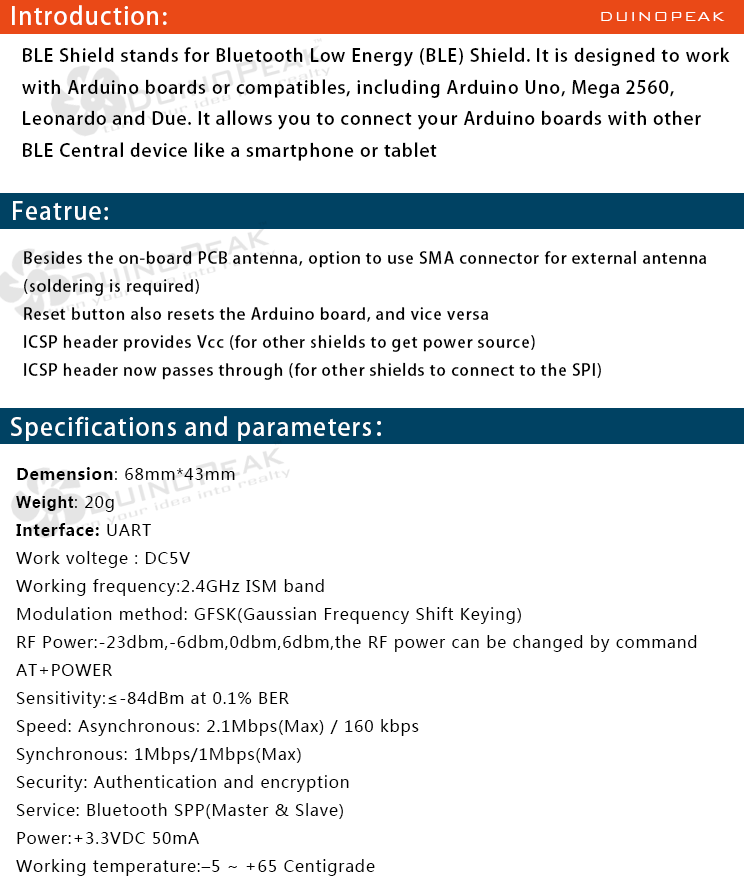
<style>
.page{position:relative;width:744px;height:888px;background:#ffffff}
.page>*{position:absolute;margin:0}
.t1{font:24px "AdobeHeitiStd-Regular";letter-spacing:0.05em;color:#ffffff}
.t2{font:18px "BankGothicBT-Light";letter-spacing:0.05em;color:#ffffff}
.t3{font:18px "AdobeHeitiStd-Regular";letter-spacing:0.05em;color:#000000}
.t4{font:16px "AdobeHeitiStd-Regular";letter-spacing:0.05em;color:#000000}
.t5{font:16px "MicrosoftYaHei";letter-spacing:0.05em;color:#000000}
.t6{font:16px "MicrosoftYaHei-Bold";letter-spacing:0.05em;color:#000000}
.t7{font:16px "Arial-BoldMT";letter-spacing:0.05em;color:#000000}
</style>
<div class="page">
<p class="t1" style="left:12px;top:5px;width:155px;height:20px">Introduction:</p>
<p class="t2" style="left:601px;top:12px;width:124px;height:9px">DUINOPEAK</p>
<p class="t3" style="left:22px;top:47px;width:708px;height:114px">BLE Shield stands for Bluetooth Low Energy (BLE) Shield. It is designed to work <br>with Arduino boards or compatibles, including Arduino Uno, Mega 2560, <br>Leonardo and Due. It allows you to connect your Arduino boards with other <br>BLE Central device like a smartphone or tablet</p>
<p class="t1" style="left:13px;top:201px;width:95px;height:19px">Featrue:</p>
<p class="t4" style="left:24px;top:250px;width:683px;height:130px">Besides the on-board PCB antenna, option to use SMA connector for external antenna <br>(soldering is required)<br>Reset button also resets the Arduino board, and vice versa<br>ICSP header provides Vcc (for other shields to get power source)<br>ICSP header now passes through (for other shields to connect to the SPI)</p>
<p class="t1" style="left:11px;top:416px;width:370px;height:25px">Specifications and parameters：</p>
<p class="t5" style="left:16px;top:467px;width:681px;height:409px"><span class="t6">Demension</span>: 68mm*43mm<br><span class="t7">Weight</span>: 20g<br><span class="t6">Interface: </span>UART<br>Work voltege : DC5V<br>Working frequency:2.4GHz ISM band<br>Modulation method: GFSK(Gaussian Frequency Shift Keying)<br>RF Power:-23dbm,-6dbm,0dbm,6dbm,the RF power can be changed by command <br>AT+POWER<br>Sensitivity:≤-84dBm at 0.1% BER<br>Speed: Asynchronous: 2.1Mbps(Max) / 160 kbps<br>Synchronous: 1Mbps/1Mbps(Max)<br>Security: Authentication and encryption<br>Service: Bluetooth SPP(Master &amp; Slave)<br>Power:+3.3VDC 50mA<br>Working temperature:–5 ~ +65 Centigrade</p>
</div>
